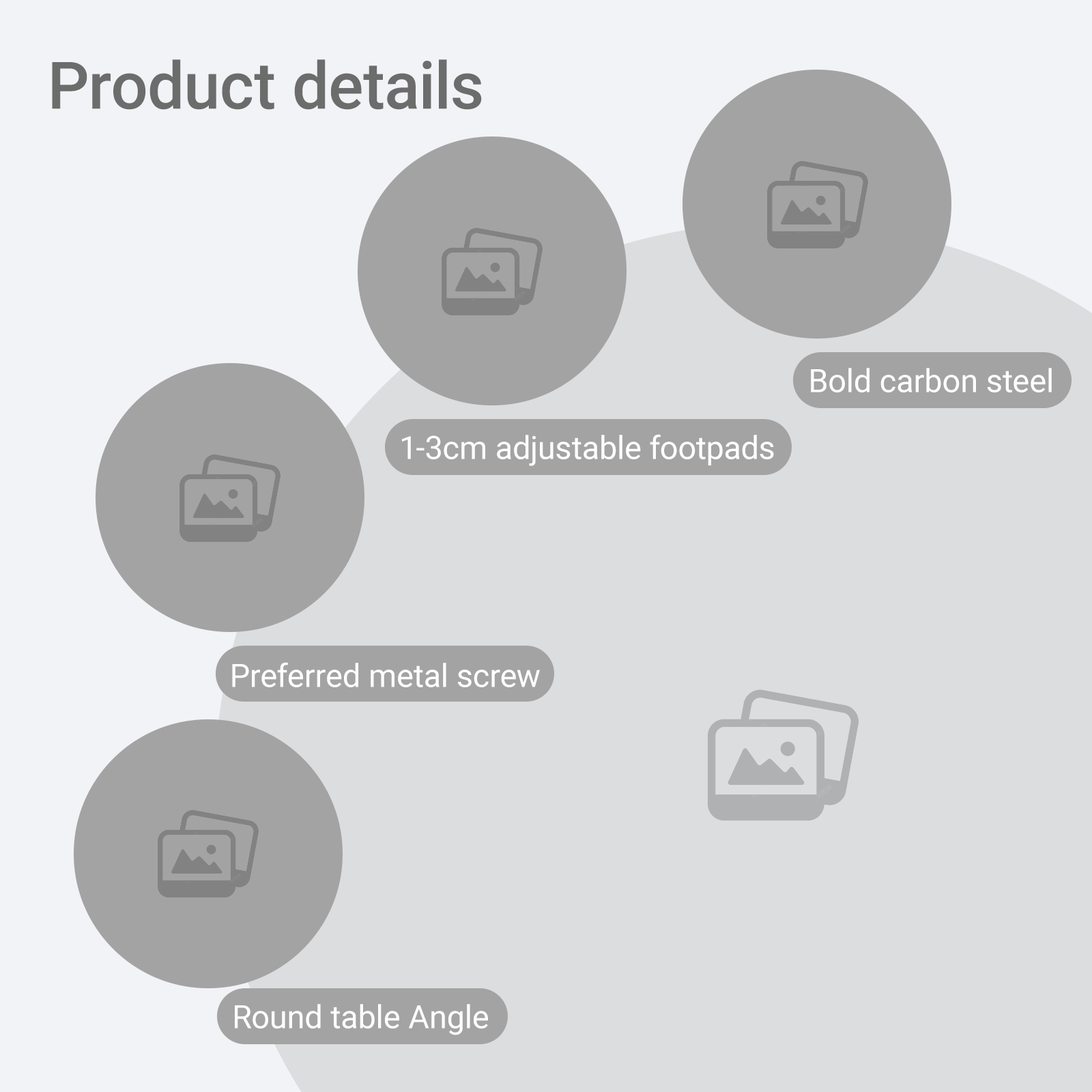
<style>
.page{position:relative;width:1092px;height:1092px;background:#dcdddf}
.page>*{position:absolute;margin:0}
.t1{font:65.5px "Roboto-Medium";color:#6c6c6c}
.t2{font:32px "Roboto-Regular";color:#ffffff}
</style>
<div class="page">
<p class="t1" style="left:52px;top:59px;width:430px;height:51px">Product details</p>
<p class="t2" style="left:811px;top:368px;width:241px;height:24px">Bold carbon steel</p>
<p class="t2" style="left:402px;top:434px;width:372px;height:32px">1-3cm adjustable footpads</p>
<p class="t2" style="left:232px;top:662px;width:308px;height:25px">Preferred metal screw</p>
<p class="t2" style="left:235px;top:1004px;width:253px;height:31px">Round table Angle</p>
</div>
